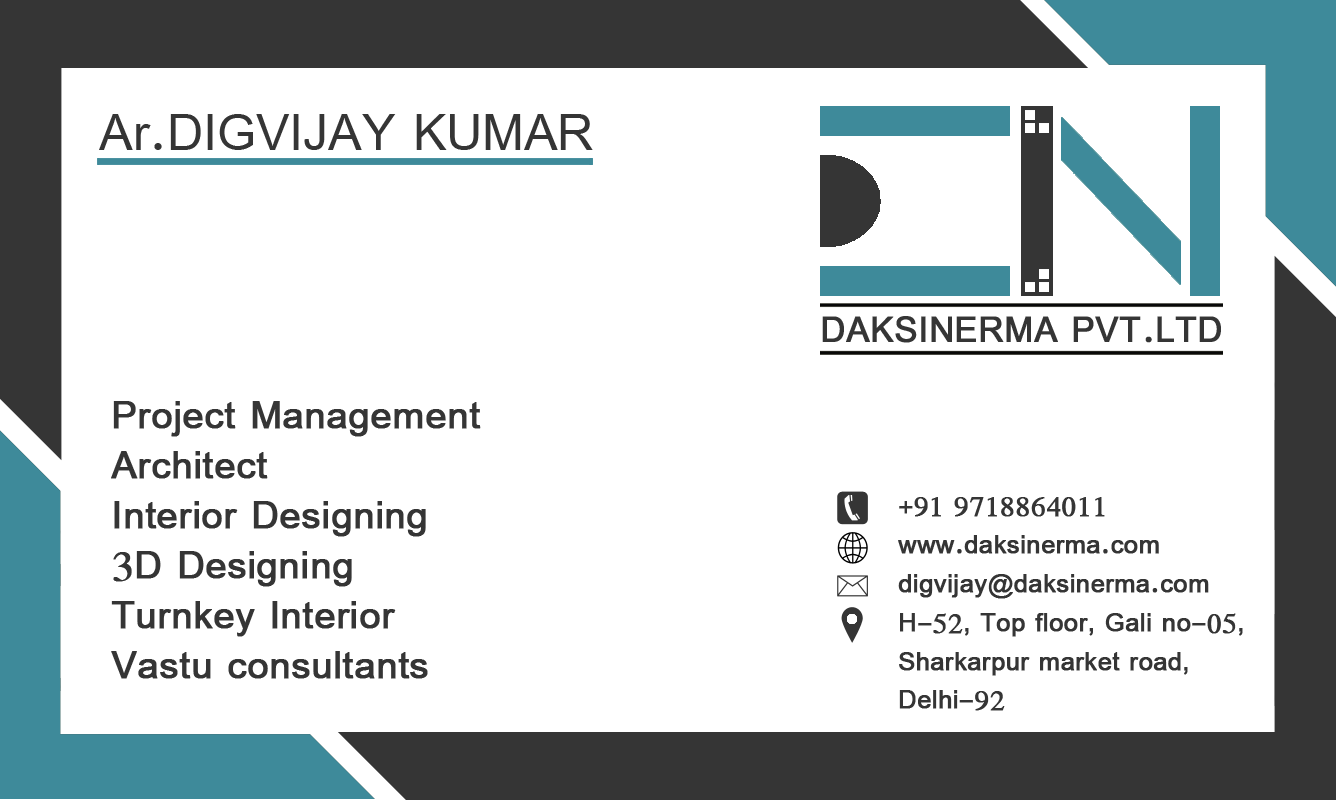
<style>
.page{position:relative;width:1336px;height:800px;background:#ffffff}
.page>*{position:absolute;margin:0}
.t1{font:55.6px "SimplifiedArabic";color:#353535}
.t2{font:38.9px "SimplifiedArabic";color:#353535;font-weight:bold}
.t3{font:41.7px "SimplifiedArabic";color:#353535;font-weight:bold}
.t4{font:27.8px/38.9px "SimplifiedArabic";color:#353535;font-weight:bold}
</style>
<div class="page">
<p class="t1" style="left:99px;top:114px;width:494px;height:36px">Ar.DIGVIJAY KUMAR</p>
<p class="t2" style="left:822px;top:316px;width:399px;height:27px">DAKSINERMA PVT.LTD</p>
<p class="t3" style="left:111px;top:401px;width:370px;height:278px">Project Management<br>Architect<br>Interior Designing<br>3D Designing<br>Turnkey Interior<br>Vastu consultants</p>
<p class="t4" style="left:898px;top:497px;width:345px;height:214px">+91 9718864011<br>www.daksinerma.com<br>digvijay@daksinerma.com<br>H-52, Top floor, Gali no-05,<br>Sharkarpur market road,<br>Delhi-92</p>
</div>
